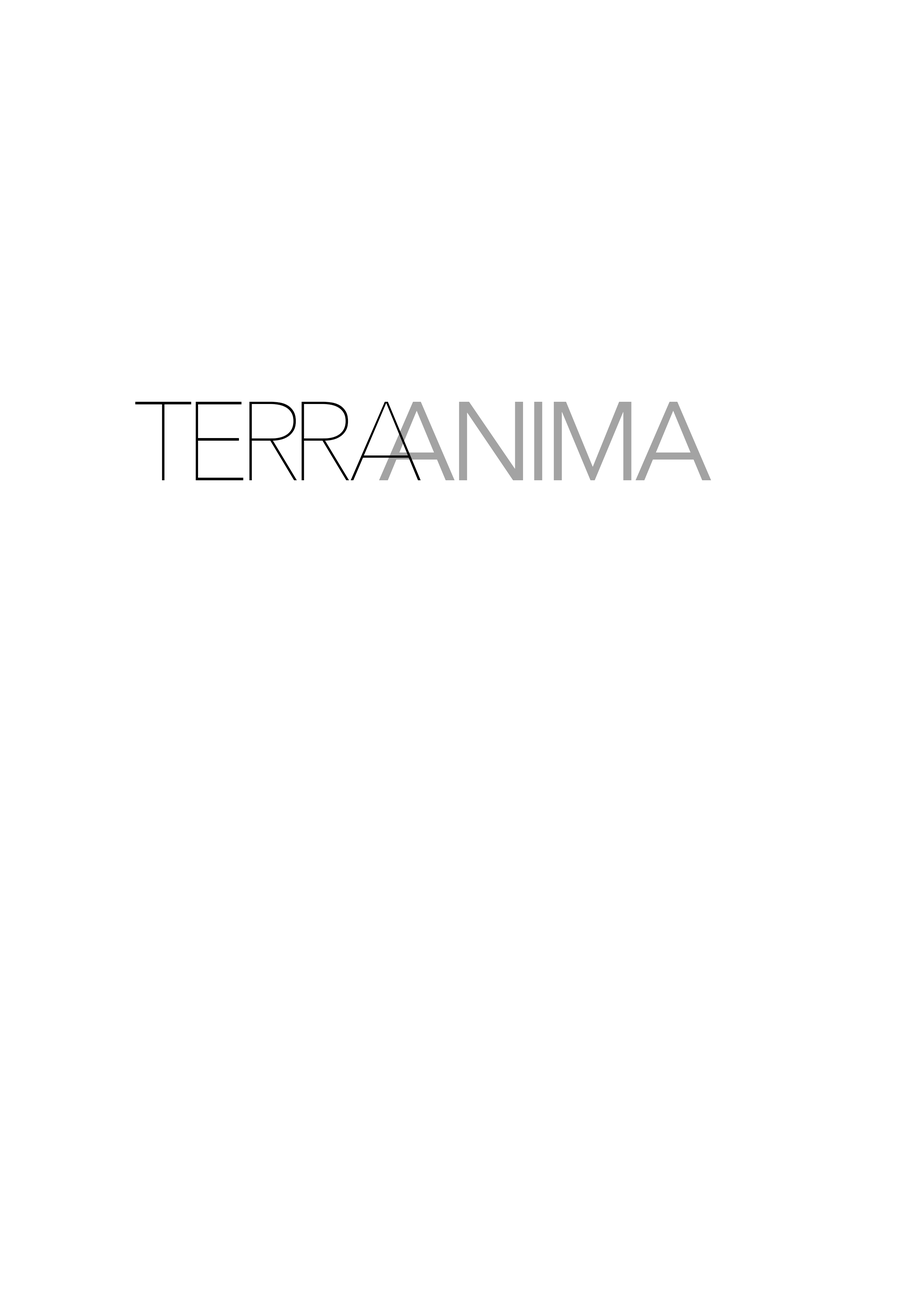
<style>
.page{position:relative;width:918px;height:1299px;background:#ffffff}
.page>*{position:absolute;margin:0}
.t1{font:111.1px "AvenirNext-UltraLight";letter-spacing:-0.025em;color:#000000;text-transform:uppercase}
.t2{font:111.1px "AvenirNext-Regular";letter-spacing:-0.025em;color:#a3a3a3;text-transform:uppercase}
</style>
<div class="page">
<p class="t1" style="left:135px;top:402px;width:286px;height:78px">Terra</p>
<p class="t2" style="left:379px;top:402px;width:332px;height:78px">Anima</p>
</div>
